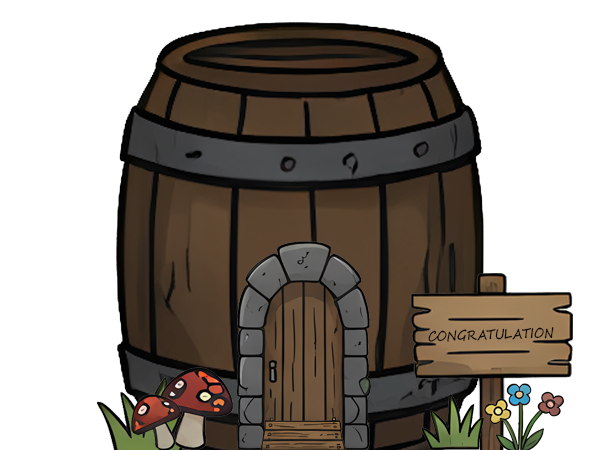
<style>
.page{position:relative;width:600px;height:450px;background:#ffffff}
.page>*{position:absolute;margin:0}
.t1{font:13.5px "SegoeScript";color:#000000;scale:0.88 1}
</style>
<div class="page">
<p class="t1" style="left:428px;top:327px;width:126px;height:15px;rotate:-2deg">CONGRATULATION</p>
</div>
